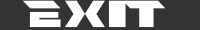
<style>
.page{position:relative;width:200px;height:30px;background:#333333}
.page>*{position:absolute;margin:0}
.t1{font:30px "Jet-Bradley";color:#ffffff;scale:1.25 1}
</style>
<div class="page">
<p class="t1" style="left:23px;top:0px;width:142px;height:28px">EXIT</p>
</div>
